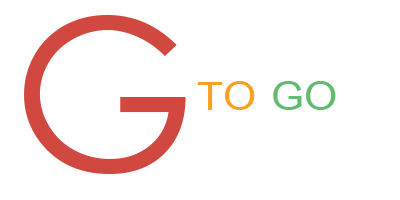
<style>
.page{position:relative;width:400px;height:200px;background:#ffffff}
.page>*{position:absolute;margin:0}
.t1{font:210.2px "CenturyGothic";color:#d14841}
.t2{font:59.9px "CordiaNew-Bold";color:#fba026;scale:1.09 1}
.t3{font:59.9px "CordiaNew-Bold";color:#61bd6d;scale:1.09 1}
</style>
<div class="page">
<p class="t1" style="left:24px;top:15px;width:162px;height:159px">G</p>
<p class="t2" style="left:198px;top:81px;width:138px;height:29px">TO <span class="t3">GO</span></p>
</div>
